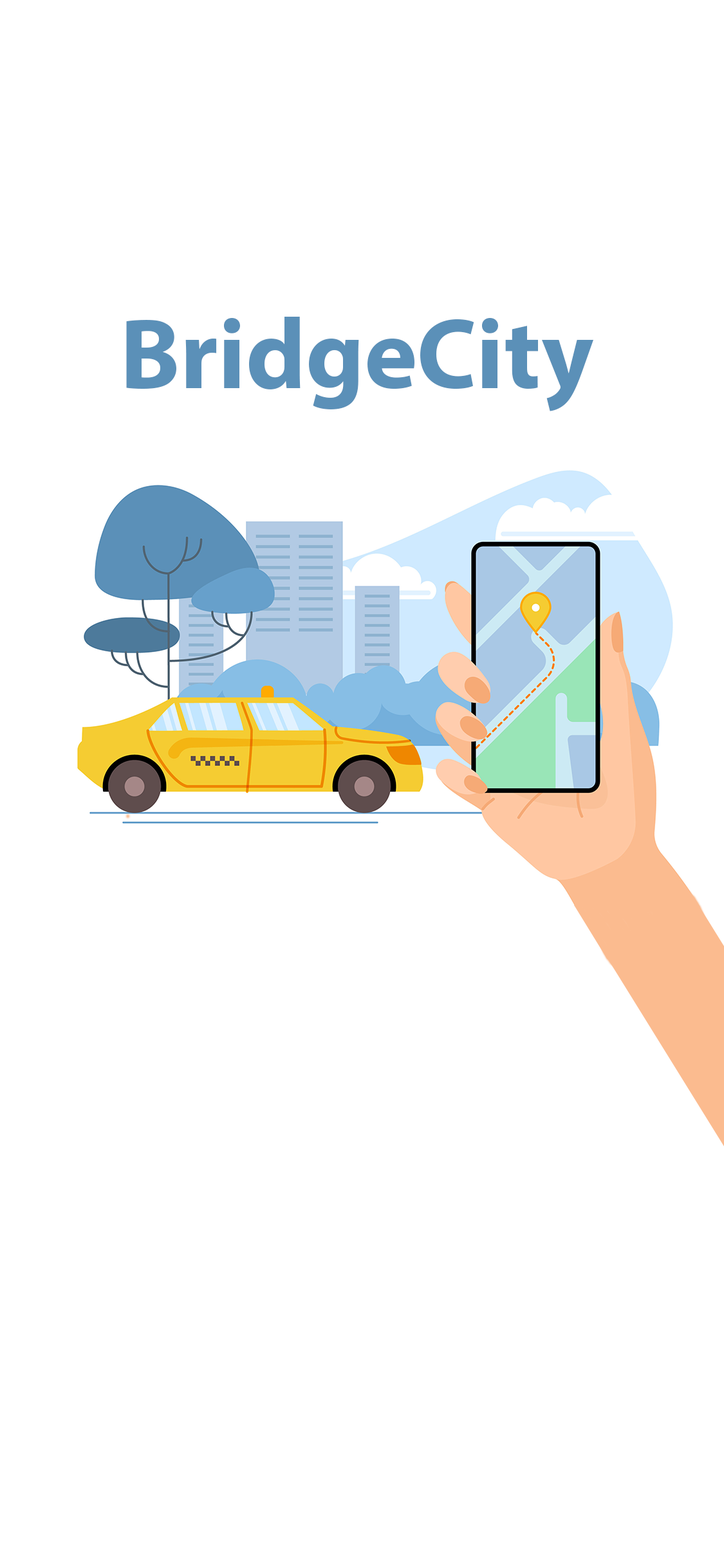
<style>
.page{position:relative;width:724px;height:1568px;background:#ffffff}
.page>*{position:absolute;margin:0}
.t1{font:100.3px "MyriadPro-Bold";color:#5b90b8}
</style>
<div class="page">
<p class="t1" style="left:126px;top:317px;width:467px;height:94px">BridgeCity</p>
</div>
